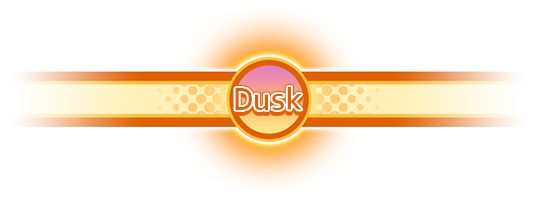
<style>
.page{position:relative;width:536px;height:200px;background:#ffffff}
.page>*{position:absolute;margin:0}
.t1{font:30px "JK-Gothic-M";color:#e06003}
</style>
<div class="page">
<p class="t1" style="left:235px;top:87px;width:67px;height:23px">Dusk</p>
</div>
